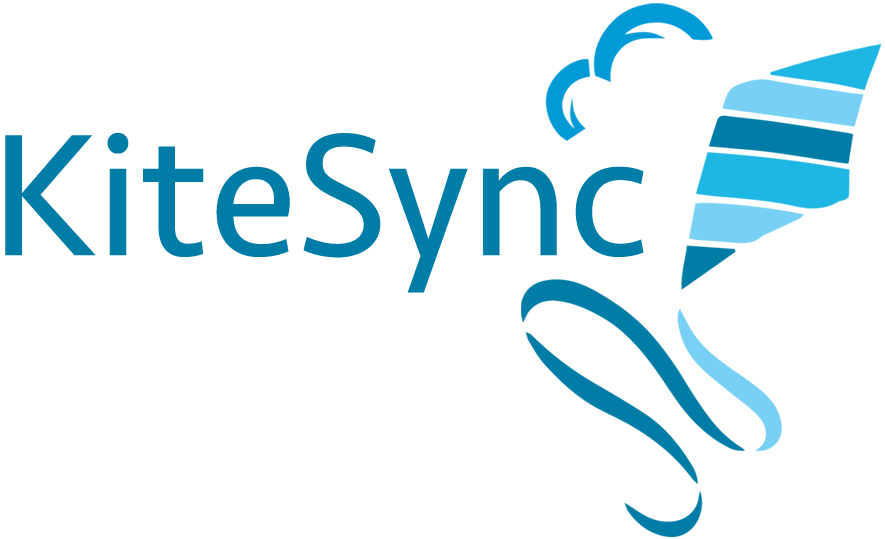
<style>
.page{position:relative;width:885px;height:539px;background:#ffffff}
.page>*{position:absolute;margin:0}
.t1{font:180px "Seravek";color:#007da6}
</style>
<div class="page">
<p class="t1" style="left:5px;top:132px;width:639px;height:161px">KiteSync</p>
</div>
